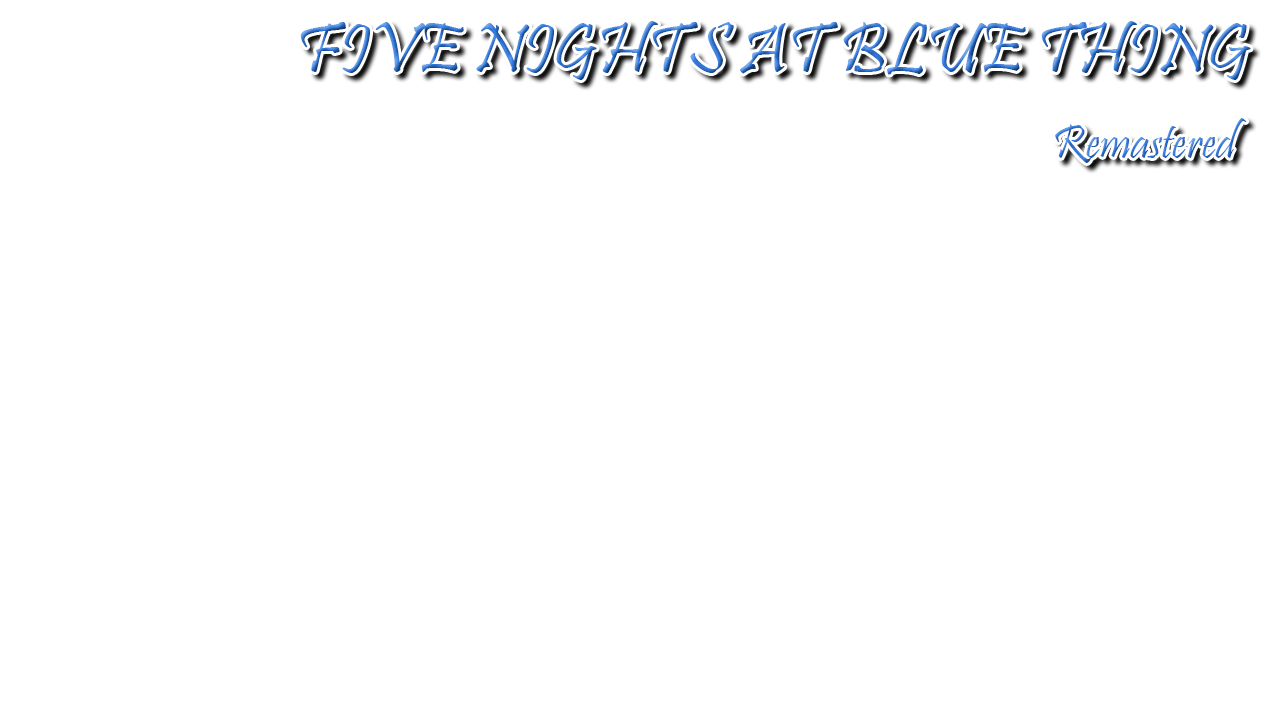
<style>
.page{position:relative;width:1280px;height:720px;background:#ffffff}
.page>*{position:absolute;margin:0}
.t1{font:72px "Pristina-Regular"}
.t2{font:48px "Pristina-Regular"}
</style>
<div class="page">
<p class="t1" style="left:300px;top:21px;width:951px;height:142px">FIVE NIGHTS AT BLUE THING<br>              <span class="t2">           Remastered</span></p>
</div>
